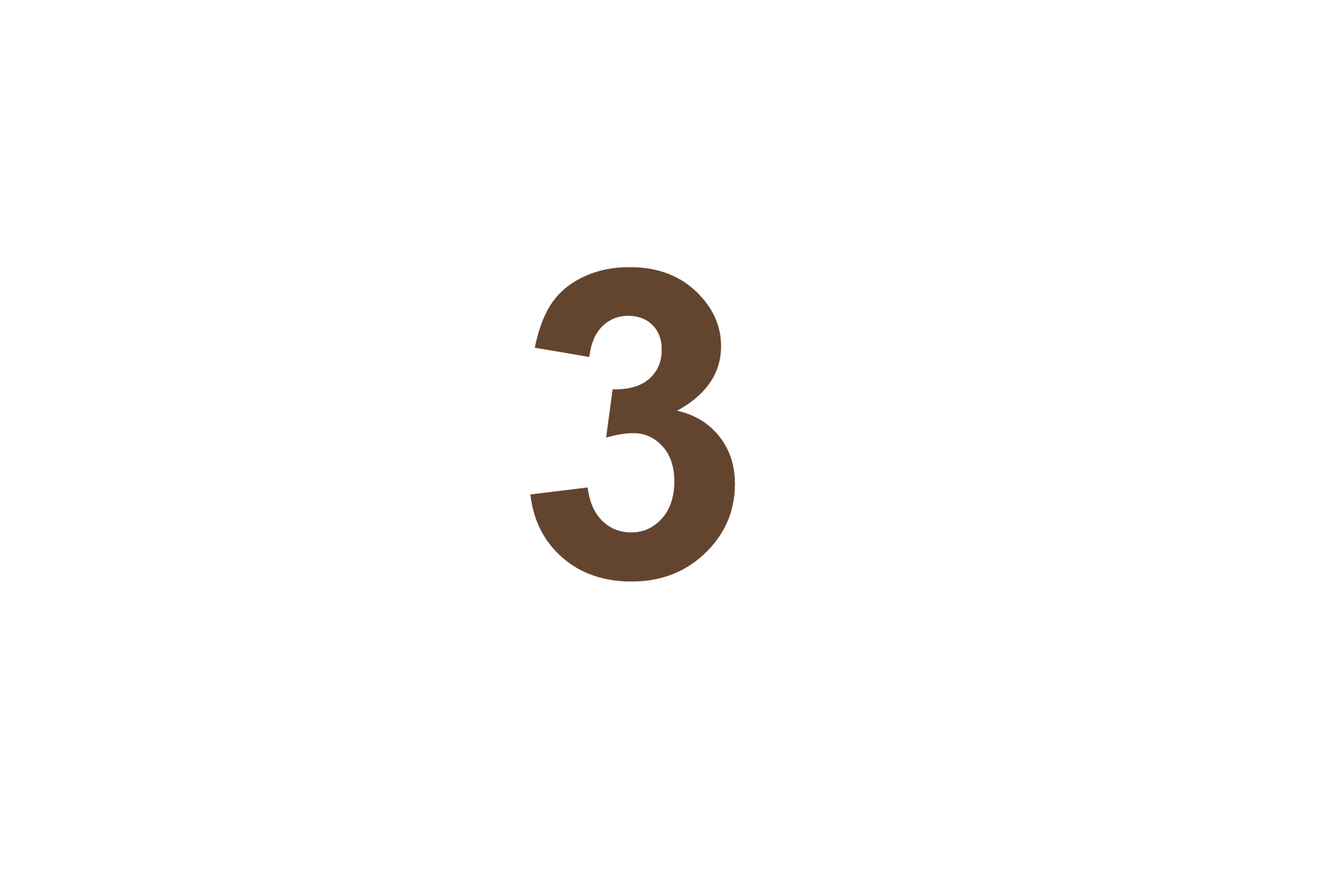
<style>
.page{position:relative;width:1337px;height:892px;background:#ffffff}
.page>*{position:absolute;margin:0}
.t1{font:429.6px "Arial-BoldMT";color:#63442f}
</style>
<div class="page">
<p class="t1" style="left:531px;top:267px;width:205px;height:315px">3</p>
</div>
